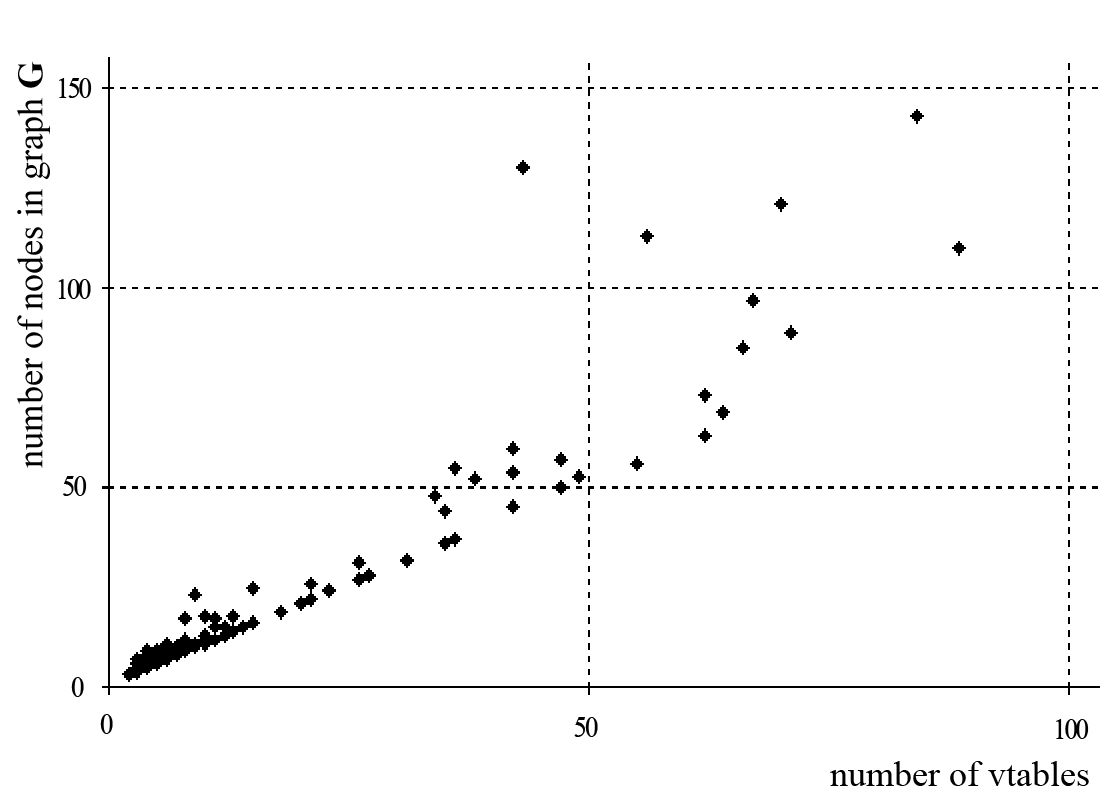
<style>
.page{position:relative;width:1100px;height:810px;background:#ffffff}
.page>*{position:absolute;margin:0}
.t1{font:36px "TimesNewRomanPSMT";color:#000000}
.t2{font:36px "TimesNewRomanPS-BoldMT";color:#000000}
.t3{font:30px "TimesNewRomanPSMT";letter-spacing:-0.08em;color:#000000;scale:0.9 1}
</style>
<div class="page">
<p class="t1" style="left:17px;top:61px;width:33px;height:407px;rotate:-90deg">number of nodes in graph <span class="t2">G</span></p>
<p class="t3" style="left:59px;top:78px;width:33px;height:20px">150</p>
<p class="t3" style="left:58px;top:279px;width:33px;height:20px">100</p>
<p class="t3" style="left:63px;top:476px;width:24px;height:20px">50</p>
<p class="t3" style="left:71px;top:677px;width:13px;height:20px">0</p>
<p class="t3" style="left:100px;top:714px;width:13px;height:20px">0</p>
<p class="t3" style="left:574px;top:717px;width:24px;height:20px">50</p>
<p class="t3" style="left:1056px;top:719px;width:33px;height:20px">100</p>
<p class="t1" style="left:830px;top:761px;width:259px;height:25px">number of vtables</p>
</div>
